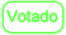
<style>
.page{position:relative;width:66px;height:35px;background:#ffffff}
.page>*{position:absolute;margin:0}
.t1{font:16px "ArialMT";color:#5fff45}
</style>
<div class="page">
<p class="t1" style="left:6px;top:10px;width:52px;height:12px">Votado</p>
</div>
